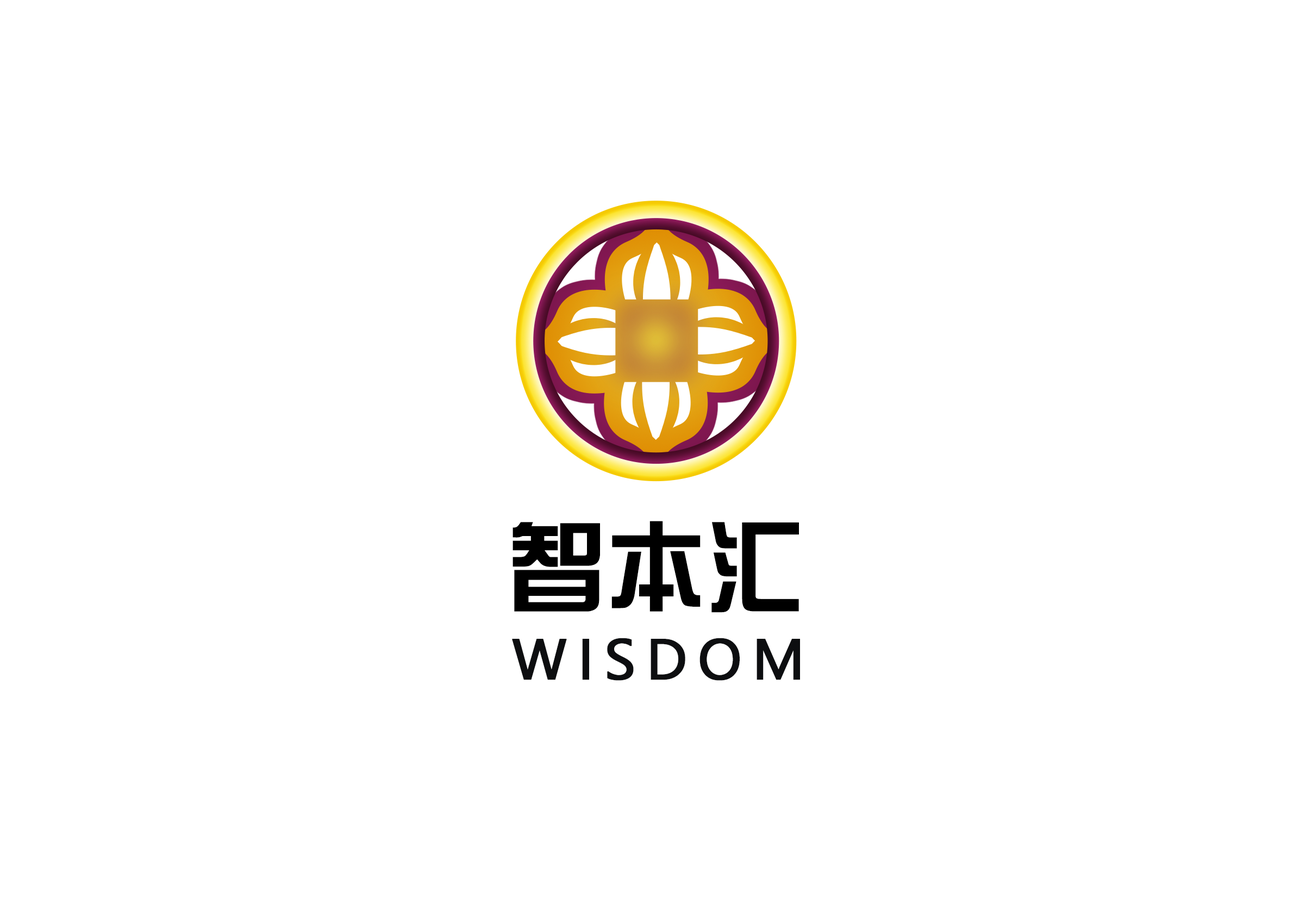
<style>
.page{position:relative;width:1312px;height:909px;background:#ffffff}
.page>*{position:absolute;margin:0}
.t1{font:99.2px "HYk1gj";color:#000000}
.t2{font:53.3px "MicrosoftYaHei";letter-spacing:0.18em;color:#0d0e10;font-weight:bold}
</style>
<div class="page">
<p class="t1" style="left:513px;top:521px;width:286px;height:92px">智本汇</p>
<p class="t2" style="left:512px;top:638px;width:288px;height:43px">WISDOM</p>
</div>
